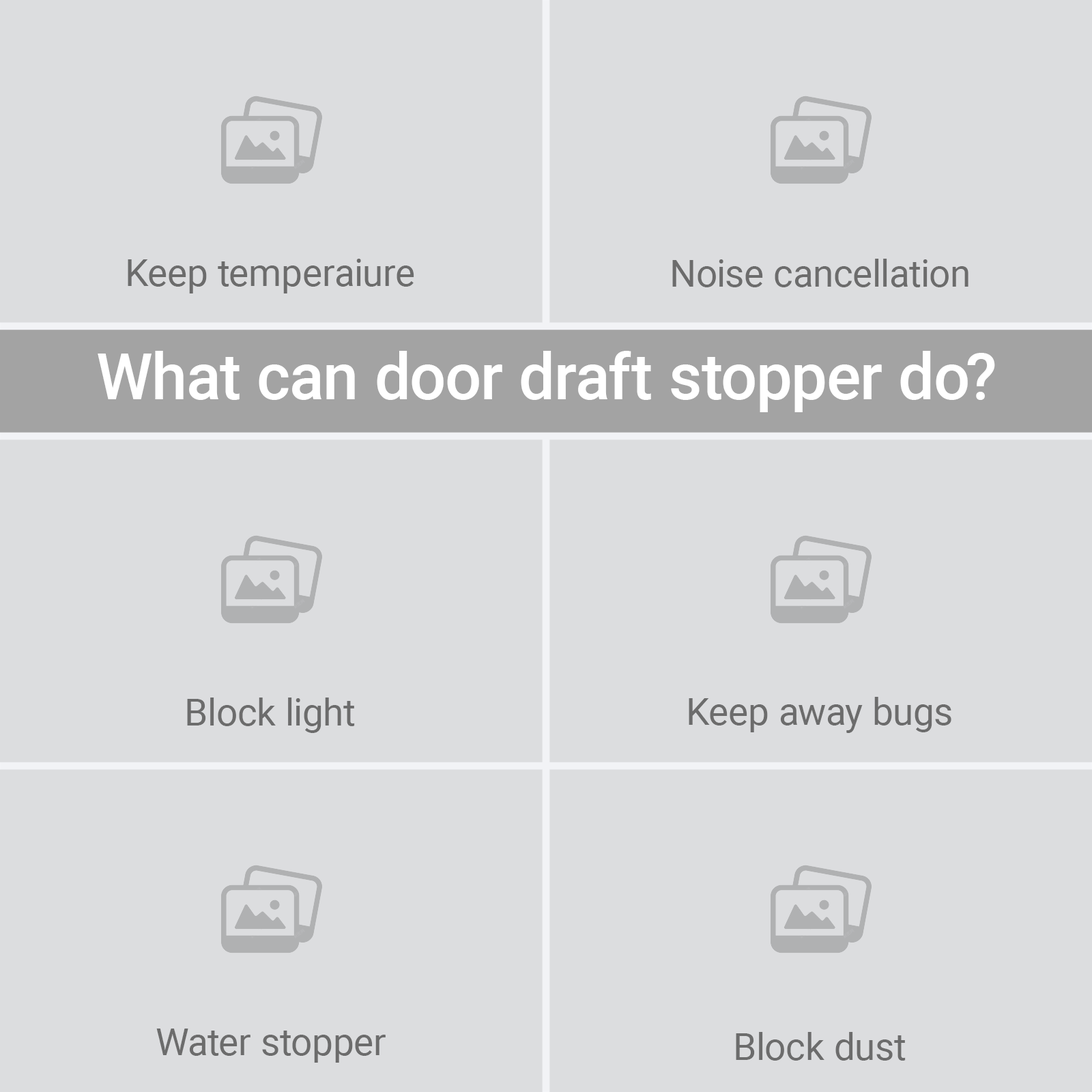
<style>
.page{position:relative;width:1092px;height:1092px;background:#dcdddf}
.page>*{position:absolute;margin:0}
.t1{font:37.9px "Roboto-Regular";color:#6c6c6c}
.t2{font:64.1px "Roboto-Medium";color:#ffffff}
</style>
<div class="page">
<p class="t1" style="left:128px;top:259px;width:286px;height:34px">Keep temperaiure</p>
<p class="t1" style="left:672px;top:259px;width:296px;height:28px">Noise cancellation</p>
<p class="t2" style="left:98px;top:351px;width:897px;height:61px">What can door draft stopper do?</p>
<p class="t1" style="left:187px;top:698px;width:168px;height:35px">Block light</p>
<p class="t1" style="left:689px;top:697px;width:262px;height:36px">Keep away bugs</p>
<p class="t1" style="left:156px;top:1029px;width:230px;height:34px">Water stopper</p>
<p class="t1" style="left:736px;top:1032px;width:170px;height:29px">Block dust</p>
</div>
